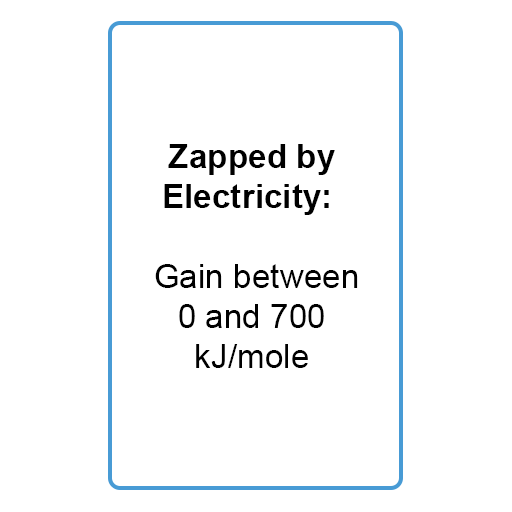
<style>
.page{position:relative;width:512px;height:512px;background:#ffffff}
.page>*{position:absolute;margin:0}
.t1{font:33.3px "ArialMT";color:#000000}
.t2{font:33.3px "Arial-BoldMT";color:#000000}
</style>
<div class="page">
<p class="t1" style="left:155px;top:144px;width:203px;height:224px;text-align:center"><span class="t2">Zapped by<br>Electricity: <br></span><br> Gain between<br>0 and 700<br>kJ/mole</p>
</div>
